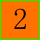
<style>
.page{position:relative;width:40px;height:40px;background:#ff7200}
.page>*{position:absolute;margin:0}
.t1{font:30px "SimSun";color:#000000}
</style>
<div class="page">
<p class="t1" style="left:14px;top:8px;width:12px;height:21px">2</p>
</div>
